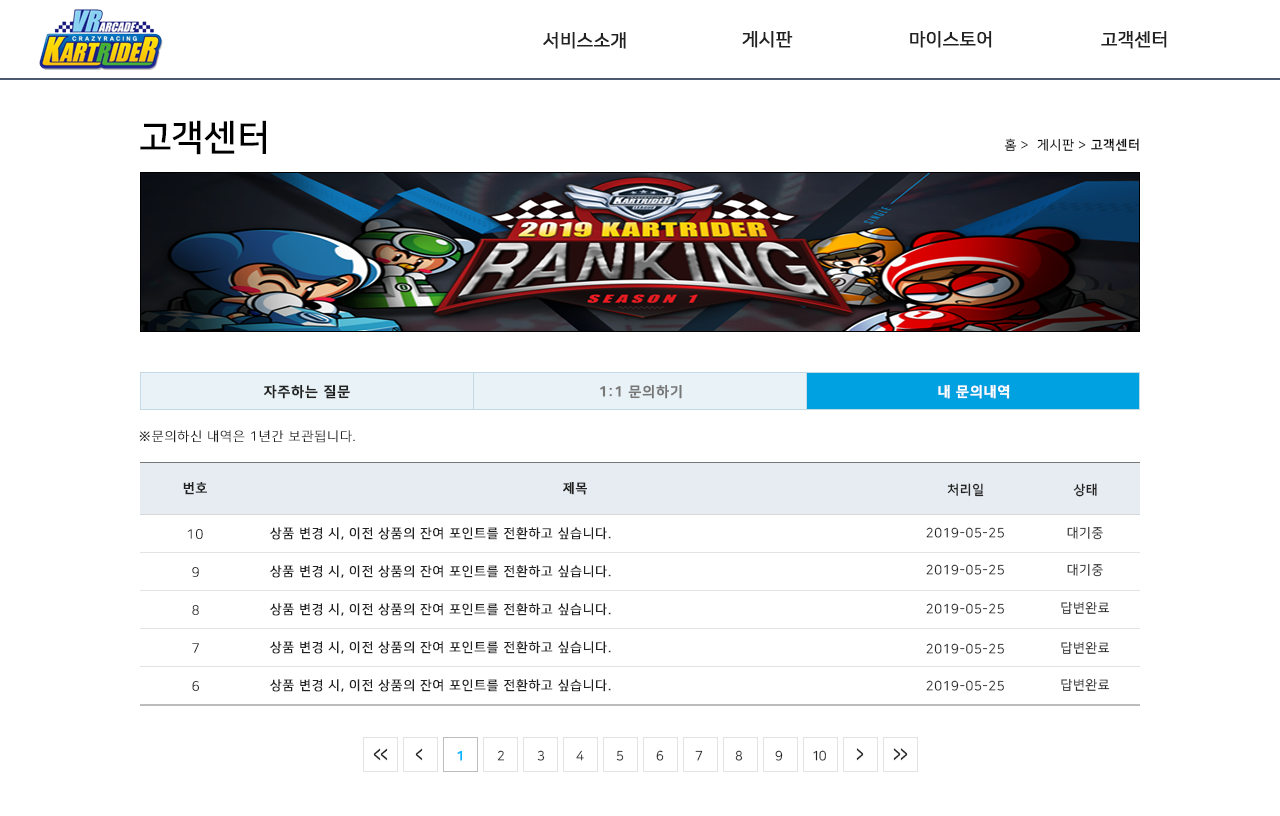
<style>
.page{position:relative;width:1280px;height:816px;background:#ffffff}
.page>*{position:absolute;margin:0}
.t1{font:18px "NanumSquareR";color:#222222;font-weight:bold}
.t2{font:36px "NanumSquareB";color:#000000}
.t3{font:13px "NanumSquareR";letter-spacing:0.05em;color:#000000}
.t4{font:13px "NanumSquareL";letter-spacing:0.05em;color:#000000}
.t5{font:13px "NanumSquareB";letter-spacing:0.05em;color:#000000}
.t6{font:14px "NanumSquareB";letter-spacing:0.05em;color:#222222;font-weight:bold}
.t7{font:14px "NanumSquareB";letter-spacing:0.05em;color:#777777;font-weight:bold}
.t8{font:14px "NanumSquareB";letter-spacing:0.05em;color:#ffffff;font-weight:bold}
.t9{font:13px "NanumSquareL";letter-spacing:0.05em;color:#222222;text-transform:uppercase;font-weight:bold}
.t10{font:13px "NanumSquareB";letter-spacing:0.05em;color:#222222;text-transform:uppercase;font-weight:bold}
.t11{font:13px "NanumSquareB";letter-spacing:0.05em;color:#222222}
.t12{font:13px "NanumSquareR";letter-spacing:0.05em;color:#222222;text-transform:uppercase;font-weight:bold}
.t13{font:13px "NanumSquareR";letter-spacing:0.05em;color:#222222}
.t14{font:13px "NanumSquareR";letter-spacing:0.05em}
.t15{font:13px "NanumSquareL";letter-spacing:0.05em;text-transform:uppercase;font-weight:bold}
.t16{font:20.5px "NanumSquareB";letter-spacing:-0.075em;color:#222222;scale:0.63 1}
.t17{font:13px "NanumSquareB";letter-spacing:-0.075em;color:#00b6ff;font-weight:bold}
.t18{font:13px "NanumSquareR";letter-spacing:-0.075em}
.t19{font:13px "NanumSquareR";letter-spacing:-0.075em;color:#222222}
.t20{font:21.1px "NanumSquareB";letter-spacing:-0.075em;color:#222222;scale:0.61 1}
</style>
<div class="page">
<p class="t1" style="left:742px;top:30px;width:51px;height:18px">게시판</p>
<p class="t1" style="left:910px;top:30px;width:82px;height:18px">마이스토어</p>
<p class="t1" style="left:1101px;top:30px;width:66px;height:18px">고객센터</p>
<p class="t1" style="left:543px;top:31px;width:83px;height:18px">서비스소개</p>
<p class="t2" style="left:140px;top:120px;width:126px;height:35px">고객센터</p>
<p class="t3" style="left:1004px;top:138px;width:135px;height:14px">홈 <span class="t4">&gt; </span> 게시판 &gt; <span class="t5">고객센터</span></p>
<p class="t6" style="left:264px;top:384px;width:86px;height:15px">자주하는 질문</p>
<p class="t7" style="left:600px;top:384px;width:82px;height:15px">1:1 문의하기</p>
<p class="t8" style="left:938px;top:384px;width:72px;height:15px">내 문의내역</p>
<p class="t9" style="left:139px;top:430px;width:216px;height:13px">※문의하신 내역은 1년간 보관됩니다.</p>
<p class="t10" style="left:183px;top:482px;width:24px;height:13px">번호</p>
<p class="t10" style="left:563px;top:482px;width:24px;height:13px">제목</p>
<p class="t11" style="left:947px;top:483px;width:37px;height:14px">처리일</p>
<p class="t11" style="left:1073px;top:483px;width:24px;height:14px">상태</p>
<p class="t9" style="left:187px;top:529px;width:16px;height:10px">10</p>
<p class="t12" style="left:270px;top:527px;width:341px;height:13px">상품 변경 시, 이전 상품의 잔여 포인트를 전환하고 싶습니다.</p>
<p class="t13" style="left:926px;top:527px;width:78px;height:11px">2019-05-25</p>
<p class="t14" style="left:1067px;top:526px;width:36px;height:14px">대기중</p>
<p class="t9" style="left:192px;top:567px;width:7px;height:10px">9</p>
<p class="t12" style="left:270px;top:565px;width:341px;height:13px">상품 변경 시, 이전 상품의 잔여 포인트를 전환하고 싶습니다.</p>
<p class="t13" style="left:926px;top:564px;width:78px;height:11px">2019-05-25</p>
<p class="t14" style="left:1067px;top:563px;width:36px;height:14px">대기중</p>
<p class="t15" style="left:192px;top:605px;width:7px;height:10px">8</p>
<p class="t12" style="left:270px;top:603px;width:341px;height:13px">상품 변경 시, 이전 상품의 잔여 포인트를 전환하고 싶습니다.</p>
<p class="t13" style="left:926px;top:603px;width:78px;height:11px">2019-05-25</p>
<p class="t13" style="left:1061px;top:601px;width:49px;height:13px">답변완료</p>
<p class="t12" style="left:270px;top:641px;width:341px;height:13px">상품 변경 시, 이전 상품의 잔여 포인트를 전환하고 싶습니다.</p>
<p class="t13" style="left:1061px;top:641px;width:49px;height:13px">답변완료</p>
<p class="t9" style="left:192px;top:643px;width:7px;height:10px">7</p>
<p class="t13" style="left:926px;top:643px;width:78px;height:11px">2019-05-25</p>
<p class="t13" style="left:1061px;top:678px;width:49px;height:13px">답변완료</p>
<p class="t9" style="left:192px;top:681px;width:7px;height:10px">6</p>
<p class="t12" style="left:270px;top:679px;width:341px;height:13px">상품 변경 시, 이전 상품의 잔여 포인트를 전환하고 싶습니다.</p>
<p class="t13" style="left:926px;top:680px;width:78px;height:11px">2019-05-25</p>
<p class="t16" style="left:373px;top:748px;width:15px;height:13px">&lt;&lt;</p>
<p class="t16" style="left:415px;top:748px;width:8px;height:13px">&lt;</p>
<p class="t17" style="left:457px;top:750px;width:6px;height:11px">1</p>
<p class="t18" style="left:497px;top:750px;width:8px;height:11px">2</p>
<p class="t19" style="left:537px;top:750px;width:8px;height:11px">3</p>
<p class="t18" style="left:576px;top:750px;width:8px;height:11px">4</p>
<p class="t18" style="left:616px;top:750px;width:8px;height:11px">5</p>
<p class="t18" style="left:656px;top:750px;width:8px;height:11px">6</p>
<p class="t19" style="left:695px;top:750px;width:8px;height:11px">7</p>
<p class="t18" style="left:735px;top:750px;width:8px;height:11px">8</p>
<p class="t19" style="left:775px;top:750px;width:8px;height:11px">9</p>
<p class="t19" style="left:813px;top:750px;width:13px;height:11px">10</p>
<p class="t20" style="left:856px;top:748px;width:8px;height:13px;rotate:180deg">&lt;</p>
<p class="t20" style="left:893px;top:748px;width:15px;height:13px;rotate:180deg">&lt;&lt;</p>
</div>
